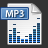
<style>
.page{position:relative;width:48px;height:48px;background:#333333}
.page>*{position:absolute;margin:0}
.t1{font:10px "MyriadWebPro";color:#ffffff;text-transform:uppercase}
</style>
<div class="page">
<p class="t1" style="left:5px;top:9px;width:19px;height:8px">MP3</p>
</div>
